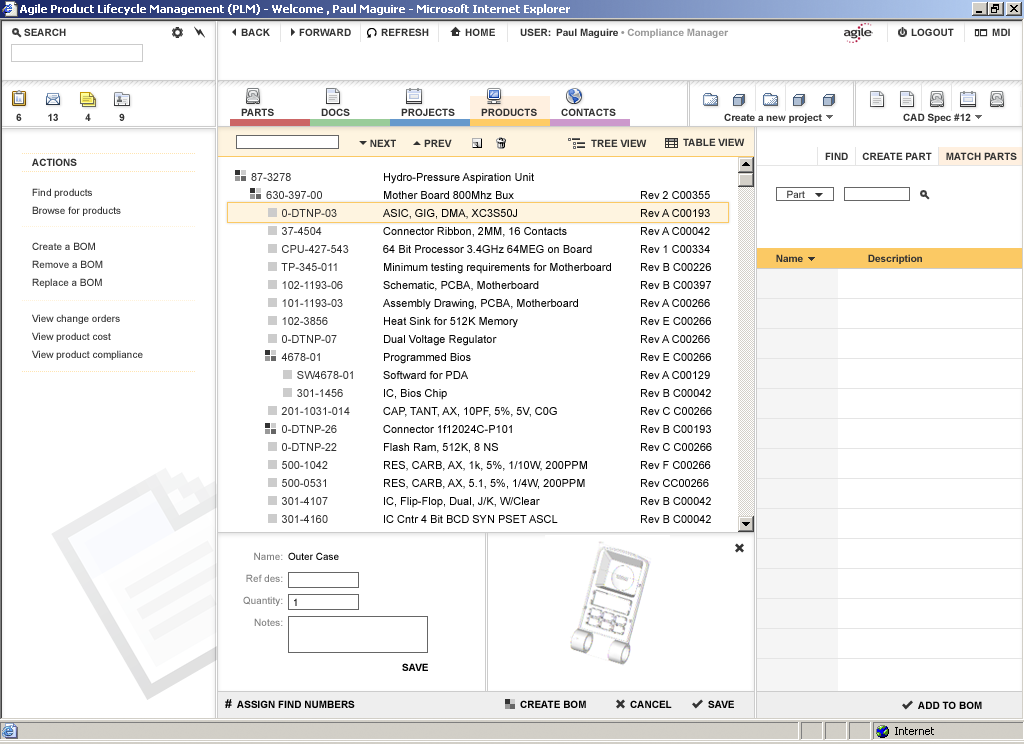
<style>
.page{position:relative;width:1024px;height:744px;background:#ffffff}
.page>*{position:absolute;margin:0}
.t1{font:10px "Arial-BoldMT";color:#333333}
.t2{font:11px/18px "ArialMT";color:#333333}
.t3{font:11px/18px "ArialMT";color:#000000}
.t4{font:10px/18px "ArialMT";color:#333333}
.t5{font:10px "ArialMT";color:#333333}
.t6{font:10px/22px "ArialMT";color:#7f7f7f}
.t7{font:10px "ArialMT";color:#000000}
.t8{font:10px "ArialMT"}
.t9{font:10px "Arial-BoldMT";color:#000000}
.t10{font:12px "Arial-BoldMT";color:#000000}
</style>
<div class="page">
<p class="t1" style="left:241px;top:108px;width:33px;height:8px">PARTS</p>
<p class="t1" style="left:321px;top:108px;width:29px;height:8px">DOCS</p>
<p class="t1" style="left:401px;top:108px;width:54px;height:8px">PROJECTS</p>
<p class="t1" style="left:481px;top:108px;width:56px;height:8px">PRODUCTS</p>
<p class="t1" style="left:561px;top:108px;width:55px;height:8px">CONTACTS</p>
<p class="t1" style="left:724px;top:113px;width:98px;height:10px">Create a new project</p>
<p class="t1" style="left:903px;top:113px;width:68px;height:10px">CAD Spec #12</p>
<p class="t1" style="left:370px;top:139px;width:82px;height:8px">NEXT          PREV</p>
<p class="t1" style="left:591px;top:139px;width:56px;height:8px">TREE VIEW</p>
<p class="t1" style="left:683px;top:138px;width:62px;height:8px">TABLE VIEW</p>
<p class="t1" style="left:32px;top:158px;width:45px;height:8px">ACTIONS</p>
<p class="t1" style="left:825px;top:152px;width:192px;height:8px">FIND     CREATE PART     MATCH PARTS</p>
<p class="t2" style="left:251px;top:173px;width:102px;height:512px">87-3278<br>     630-397-00 <br>          0-DTNP-03 <br>          37-4504            <br>          CPU-427-543<br>          TP-345-011<br>          102-1193-06<br>          101-1193-03<br>          102-3856<br>          0-DTNP-07<br>          4678-01<br>               SW4678-01<br>               301-1456<br>          201-1031-014<br>          0-DTNP-26<br>          0-DTNP-22<br>          500-1042<br>          500-0531<br>          301-4107<br>          301-4160<br>          301-4158<br>          403-108-02<br>          403-100-05<br>     IFU-00564<br>     1554-02<br>          1232-01<br>          P00007<br>     54-3468<br>          D00022</p>
<p class="t3" style="left:383px;top:173px;width:228px;height:515px">Hydro-Pressure Aspiration Unit<br>Mother Board 800Mhz Bux<br>ASIC, GIG, DMA, XC3S50J<br>Connector Ribbon, 2MM, 16 Contacts<br>64 Bit Processor 3.4GHz 64MEG on Board<br>Minimum testing requirements for Motherboard<br>Schematic, PCBA, Motherboard<br>Assembly Drawing, PCBA, Motherboard<br>Heat Sink for 512K Memory<br>Dual Voltage Regulator<br>Programmed Bios<br>Softward for PDA<br>IC, Bios Chip<br>CAP, TANT, AX, 10PF, 5%, 5V, C0G<br>Connector 1f12024C-P101<br>Flash Ram, 512K, 8 NS<br>RES, CARB, AX, 1k, 5%, 1/10W, 200PPM<br>RES, CARB, AX, 5.1, 5%, 1/4W, 200PPM<br>IC, Flip-Flop, Dual, J/K, W/Clear<br>IC Cntr 4 Bit BCD SYN PSET ASCL<br>IC Multiplex SEL QUAD 2-1 INV<br>Diode, REC .1A 50V<br>Diode, Schottky REC .5A 60V<br>Instructions for use CCO<br>Outer Case<br>180W Power Supply<br>AC Fan Module - Low Profile Mount<br>Control Board, Top Assembly<br>Control board assembly instructions</p>
<p class="t4" style="left:32px;top:188px;width:111px;height:172px">Find products<br>Browse for products<br><br>Create a BOM<br>Remove a BOM<br>Replace a BOM<br><br>View change orders<br>View product cost<br>View product compliance</p>
<p class="t3" style="left:641px;top:191px;width:71px;height:476px">Rev 2 C00355<br>Rev A C00193<br>Rev A C00042<br>Rev 1 C00334<br>Rev B C00226<br>Rev B C00397<br>Rev A C00266<br>Rev E C00266<br>Rev A C00266<br>Rev E C00266<br>Rev A C00129<br>Rev B C00042<br>Rev C C00266<br>Rev B C00193<br>Rev C C00266<br>Rev F C00266<br>Rev CC00266<br>Rev B C00042<br>Rev B C00042<br>Rev B C00042<br>Rev D C00266<br>Rev C C00266<br>Rev A C00042<br>Rev B C00042<br>Rev A C00042<br>Rev A C00042<br>Rev 2 C00330</p>
<p class="t5" style="left:787px;top:190px;width:18px;height:8px">Part</p>
<p class="t1" style="left:776px;top:254px;width:27px;height:8px">Name</p>
<p class="t1" style="left:868px;top:254px;width:54px;height:10px">Description</p>
<p class="t6" style="left:243px;top:552px;width:40px;height:74px;text-align:right">Name:<br>Ref des:<br>Quantity:<br>Notes:</p>
<p class="t7" style="left:288px;top:552px;width:51px;height:8px">Outer Case</p>
<p class="t8" style="left:294px;top:598px;width:3px;height:8px">1</p>
<p class="t9" style="left:402px;top:663px;width:26px;height:8px">SAVE</p>
<p class="t10" style="left:225px;top:699px;width:7px;height:9px">#</p>
<p class="t9" style="left:237px;top:700px;width:118px;height:8px">ASSIGN FIND NUMBERS</p>
<p class="t9" style="left:520px;top:700px;width:66px;height:8px">CREATE BOM</p>
<p class="t9" style="left:630px;top:700px;width:42px;height:8px">CANCEL</p>
<p class="t9" style="left:708px;top:700px;width:26px;height:8px">SAVE</p>
<p class="t9" style="left:918px;top:701px;width:64px;height:8px">ADD TO BOM</p>
</div>
